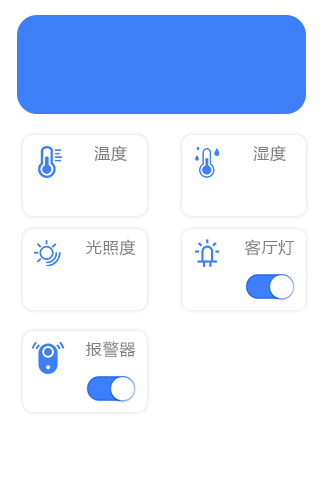
<style>
.page{position:relative;width:320px;height:480px;background:#ffffff}
.page>*{position:absolute;margin:0}
.t1{font:16px "MicrosoftYaHei";letter-spacing:0.05em;color:#7f7f7f}
</style>
<div class="page">
<p class="t1" style="left:94px;top:145px;width:33px;height:17px">温度</p>
<p class="t1" style="left:253px;top:145px;width:33px;height:17px">湿度</p>
<p class="t1" style="left:85px;top:239px;width:51px;height:17px">光照度</p>
<p class="t1" style="left:244px;top:239px;width:51px;height:17px">客厅灯</p>
<p class="t1" style="left:86px;top:341px;width:50px;height:17px">报警器</p>
</div>
